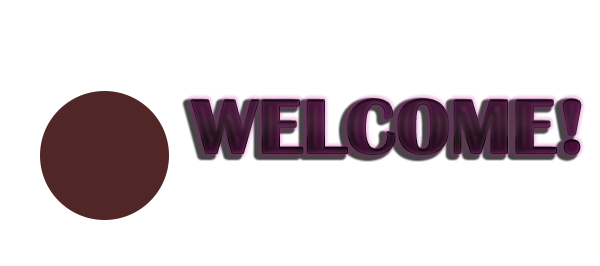
<style>
.page{position:relative;width:600px;height:266px;background:#ffffff}
.page>*{position:absolute;margin:0}
.t1{font:79.2px "BritannicBold";color:#3f1a33;text-transform:uppercase;scale:1.06 1}
</style>
<div class="page">
<p class="t1" style="left:191px;top:99px;width:390px;height:55px">Welcome!</p>
</div>
